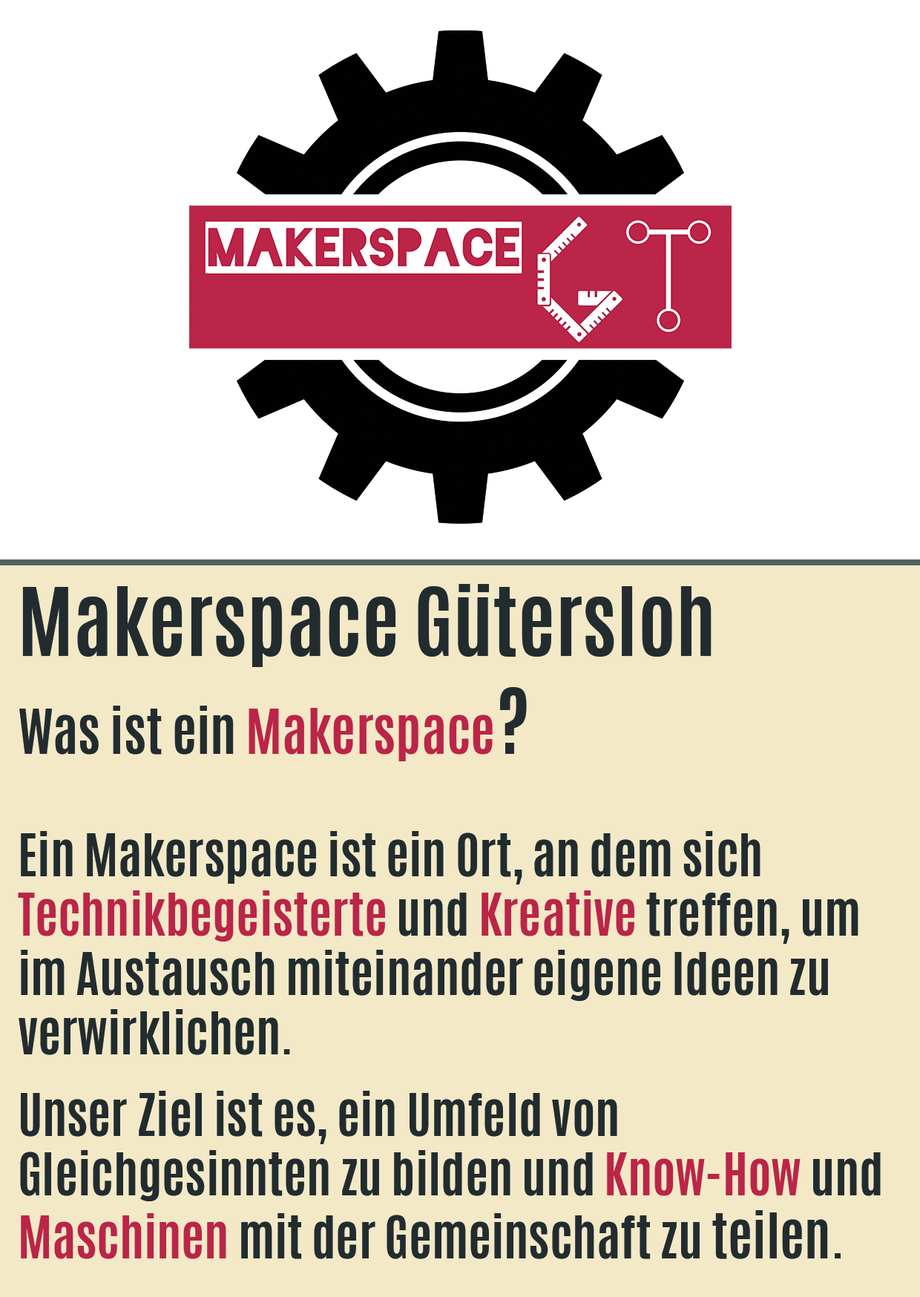
<style>
.page{position:relative;width:920px;height:1297px;background:#f3e9c7}
.page>*{position:absolute;margin:0}
.t1{font:80.4px "Antonio-Bold";color:#222c2f}
.t2{font:49.4px "Antonio-Bold";color:#222c2f}
.t3{font:52.5px "Antonio-Bold";color:#222c2f}
.t4{font:52.5px "Antonio-Bold";color:#ba2548}
.t5{font:77.3px "Antonio-Bold";color:#222c2f}
.t6{font:49.4px "Antonio-Bold";color:#ba2548}
</style>
<div class="page">
<p class="t1" style="left:22px;top:584px;width:689px;height:83px">Makerspace Gütersloh</p>
<p class="t2" style="left:18px;top:687px;width:862px;height:572px"><span class="t3">Was ist ein </span><span class="t4">Makerspace</span><span class="t5">?<br><br></span>Ein Makerspace ist ein Ort, an dem sich <span class="t6">Technikbegeisterte </span>und <span class="t6">Kreative </span>treffen, um im Austausch miteinander eigene Ideen zu verwirklichen. <br> <br>Unser Ziel ist es, ein Umfeld von Gleichgesinnten zu bilden und <span class="t6">Know-How</span> und <span class="t6">Maschinen</span> mit der Gemeinschaft zu <span class="t3">teilen.</span></p>
</div>
